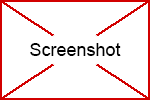
<style>
.page{position:relative;width:150px;height:100px;background:#ffffff}
.page>*{position:absolute;margin:0}
.t1{font:18px "ArialMT";color:#000000}
</style>
<div class="page">
<p class="t1" style="left:30px;top:43px;width:91px;height:13px">Screenshot</p>
</div>
